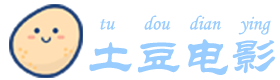
<style>
.page{position:relative;width:280px;height:80px;background:#ffffff}
.page>*{position:absolute;margin:0}
.t1{font:20px "STLiti";color:#99ccff}
.t2{font:18px "¿¬Ìå";color:#99ccff}
.t3{font:48px "STLiti";color:#99ccff}
</style>
<div class="page">
<p class="t1" style="left:100px;top:15px;width:171px;height:20px"><span class="t2">  </span>tu      dou    dian    ying</p>
<p class="t3" style="left:89px;top:39px;width:187px;height:36px">土豆电影</p>
</div>
